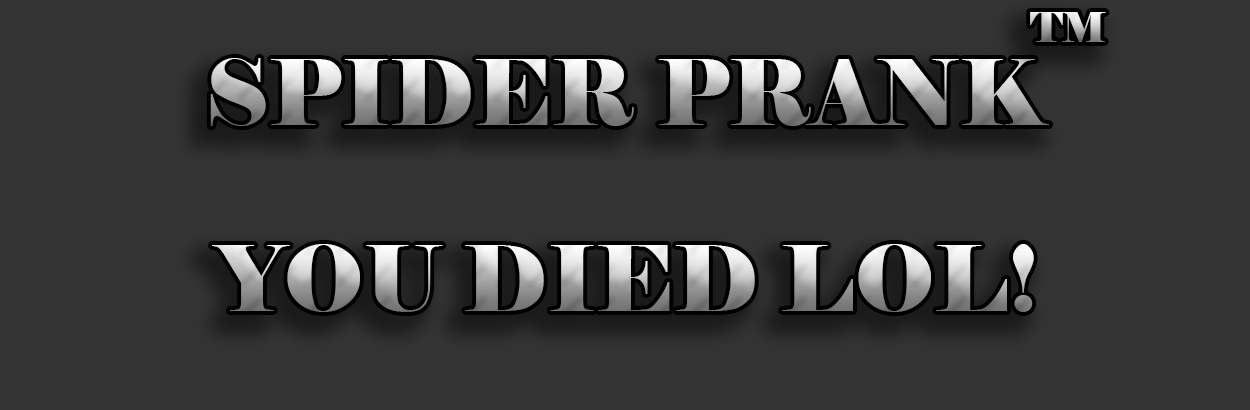
<style>
.page{position:relative;width:1250px;height:410px;background:#333333}
.page>*{position:absolute;margin:0}
.t1{font:40.8px "Elephant-Regular"}
.t2{font:89.8px "Elephant-Regular"}
</style>
<div class="page">
<p class="t1" style="left:1030px;top:12px;width:76px;height:30px">TM</p>
<p class="t2" style="left:210px;top:58px;width:839px;height:68px">SPIDER PRANK</p>
<p class="t2" style="left:212px;top:244px;width:822px;height:68px">YOU DIED LOL!</p>
</div>
